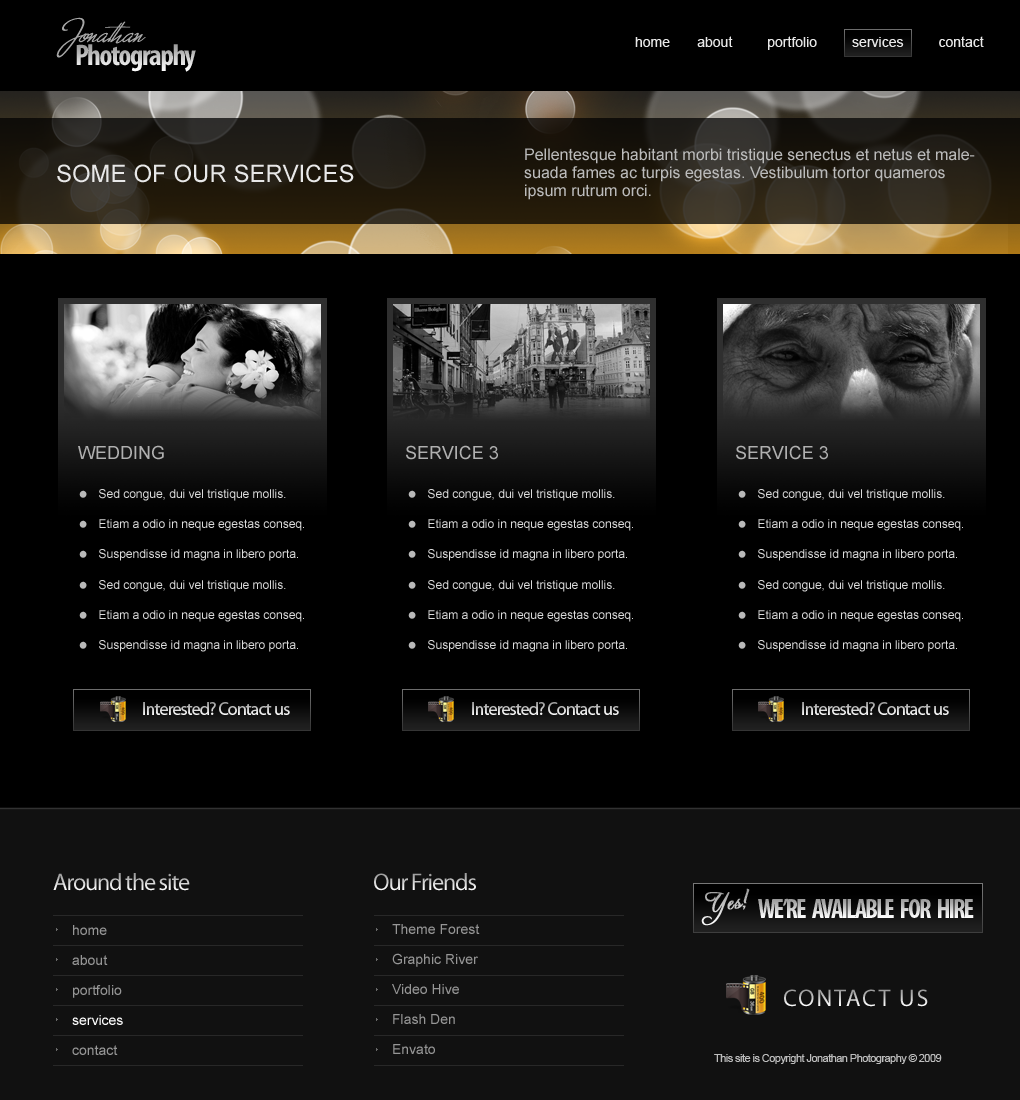
<style>
.page{position:relative;width:1020px;height:1100px;background:#000000}
.page>*{position:absolute;margin:0}
.t1{font:14px "ArialMT";color:#e8e8e8}
.t2{font:16px/18px "ArialMT";color:#bbbbbb}
.t3{font:24px "ArialMT";color:#e8e8e8}
.t4{font:18px "ArialMT";color:#b0b0b0;text-transform:uppercase}
.t5{font:18px "ArialMT";color:#b0b0b0}
.t6{font:12px "ArialMT";color:#b0b0b0}
.t7{font:60px "ArnoPro-Regular";color:#b9b9b9}
.t8{font:12px/30px "ArialMT";color:#dbdbdb}
.t9{font:18px "MyriadPro-Regular";letter-spacing:-0.05em}
.t10{font:24px "MyriadPro-Regular";letter-spacing:-0.05em}
.t11{font:27px "MyriadPro-BoldCond";letter-spacing:-0.075em}
.t12{font:14px/30px "ArialMT";color:#969696}
.t13{font:14px/30px "ArialMT";color:#ffffff}
.t14{font:24px "MyriadPro-Regular";letter-spacing:0.075em}
.t15{font:11px "ArialMT";letter-spacing:-0.05em;color:#bdbdbd}
</style>
<div class="page">
<p class="t1" style="left:635px;top:36px;width:349px;height:14px">home       about         portfolio         services         contact</p>
<p class="t2" style="left:524px;top:148px;width:451px;height:52px">Pellentesque habitant morbi tristique senectus et netus et malesuada fames ac turpis egestas. Vestibulum tortor quameros ipsum rutrum orci.</p>
<p class="t3" style="left:57px;top:164px;width:297px;height:19px">SOME OF OUR SERVICES</p>
<p class="t4" style="left:78px;top:445px;width:86px;height:15px">Wedding</p>
<p class="t5" style="left:406px;top:445px;width:92px;height:15px"><span class="t6"><br></span>SERVICE 3</p>
<p class="t5" style="left:736px;top:445px;width:92px;height:15px"><span class="t6"><br></span>SERVICE 3</p>
<p class="t7" style="left:79px;top:490px;width:8px;height:8px">.</p>
<p class="t8" style="left:99px;top:489px;width:205px;height:72px">Sed congue, dui vel tristique mollis.<br>Etiam a odio in neque egestas conseq.<br>Suspendisse id magna in libero porta.</p>
<p class="t7" style="left:408px;top:490px;width:8px;height:8px">.</p>
<p class="t8" style="left:428px;top:489px;width:205px;height:72px">Sed congue, dui vel tristique mollis.<br>Etiam a odio in neque egestas conseq.<br>Suspendisse id magna in libero porta.</p>
<p class="t7" style="left:738px;top:490px;width:8px;height:8px">.</p>
<p class="t8" style="left:758px;top:489px;width:205px;height:72px">Sed congue, dui vel tristique mollis.<br>Etiam a odio in neque egestas conseq.<br>Suspendisse id magna in libero porta.</p>
<p class="t7" style="left:79px;top:520px;width:8px;height:8px">.</p>
<p class="t7" style="left:408px;top:520px;width:8px;height:8px">.</p>
<p class="t7" style="left:738px;top:520px;width:8px;height:8px">.</p>
<p class="t7" style="left:79px;top:550px;width:8px;height:8px">.</p>
<p class="t7" style="left:408px;top:550px;width:8px;height:8px">.</p>
<p class="t7" style="left:738px;top:550px;width:8px;height:8px">.</p>
<p class="t7" style="left:79px;top:581px;width:8px;height:8px">.</p>
<p class="t8" style="left:99px;top:580px;width:205px;height:72px">Sed congue, dui vel tristique mollis.<br>Etiam a odio in neque egestas conseq.<br>Suspendisse id magna in libero porta.</p>
<p class="t7" style="left:408px;top:581px;width:8px;height:8px">.</p>
<p class="t8" style="left:428px;top:580px;width:205px;height:72px">Sed congue, dui vel tristique mollis.<br>Etiam a odio in neque egestas conseq.<br>Suspendisse id magna in libero porta.</p>
<p class="t7" style="left:738px;top:581px;width:8px;height:8px">.</p>
<p class="t8" style="left:758px;top:580px;width:205px;height:72px">Sed congue, dui vel tristique mollis.<br>Etiam a odio in neque egestas conseq.<br>Suspendisse id magna in libero porta.</p>
<p class="t7" style="left:79px;top:611px;width:8px;height:8px">.</p>
<p class="t7" style="left:408px;top:611px;width:8px;height:8px">.</p>
<p class="t7" style="left:738px;top:611px;width:8px;height:8px">.</p>
<p class="t7" style="left:79px;top:641px;width:8px;height:8px">.</p>
<p class="t7" style="left:408px;top:641px;width:8px;height:8px">.</p>
<p class="t7" style="left:738px;top:641px;width:8px;height:8px">.</p>
<p class="t9" style="left:143px;top:702px;width:147px;height:13px">Interested? Contact us</p>
<p class="t9" style="left:472px;top:702px;width:147px;height:13px">Interested? Contact us</p>
<p class="t9" style="left:802px;top:702px;width:147px;height:13px">Interested? Contact us</p>
<p class="t10" style="left:53px;top:873px;width:137px;height:18px">Around the site</p>
<p class="t10" style="left:374px;top:873px;width:102px;height:18px">Our Friends</p>
<p class="t11" style="left:758px;top:898px;width:216px;height:20px">WE’RE   AVAILABLE   FOR   HIRE</p>
<p class="t12" style="left:72px;top:925px;width:51px;height:130px">home<br>about<br>portfolio<br><span class="t13">services<br></span>contact</p>
<p class="t12" style="left:392px;top:924px;width:88px;height:130px">Theme Forest<br>Graphic River<br>Video Hive<br>Flash Den<br>Envato</p>
<p class="t14" style="left:784px;top:989px;width:144px;height:18px">CONTACT US</p>
<p class="t15" style="left:714px;top:1054px;width:228px;height:10px">This site is Copyright Jonathan Photography © 2009</p>
</div>
